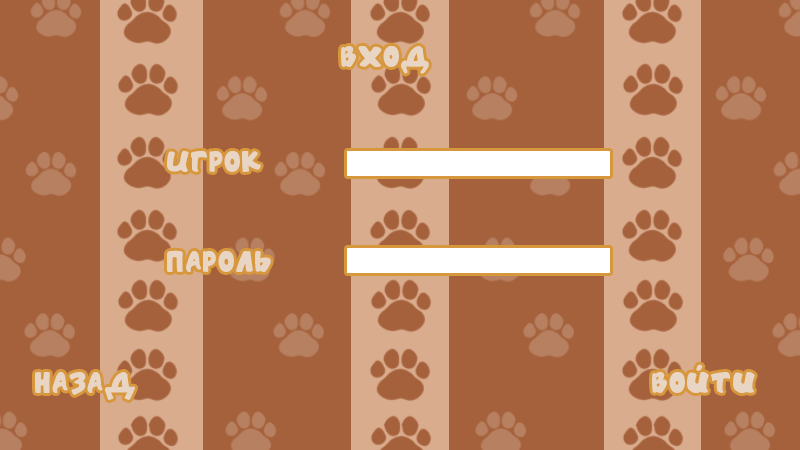
<style>
.page{position:relative;width:800px;height:450px;background:#a5613c}
.page>*{position:absolute;margin:0}
.t1{font:24px "HandSound";color:#e9d5c4}
</style>
<div class="page">
<p class="t1" style="left:341px;top:45px;width:88px;height:29px">Вход</p>
<p class="t1" style="left:167px;top:151px;width:94px;height:21px">ИГРОК</p>
<p class="t1" style="left:167px;top:250px;width:104px;height:22px">ПАРОЛЬ</p>
<p class="t1" style="left:652px;top:364px;width:103px;height:29px">Войти</p>
<p class="t1" style="left:35px;top:372px;width:100px;height:28px">НАЗАД</p>
</div>
